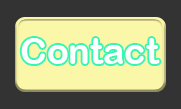
<style>
.page{position:relative;width:181px;height:109px;background:#333333}
.page>*{position:absolute;margin:0}
.t1{font:36px "ArialRoundedMTBold";color:#ffffff}
</style>
<div class="page">
<p class="t1" style="left:21px;top:38px;width:139px;height:26px">Contact</p>
</div>
